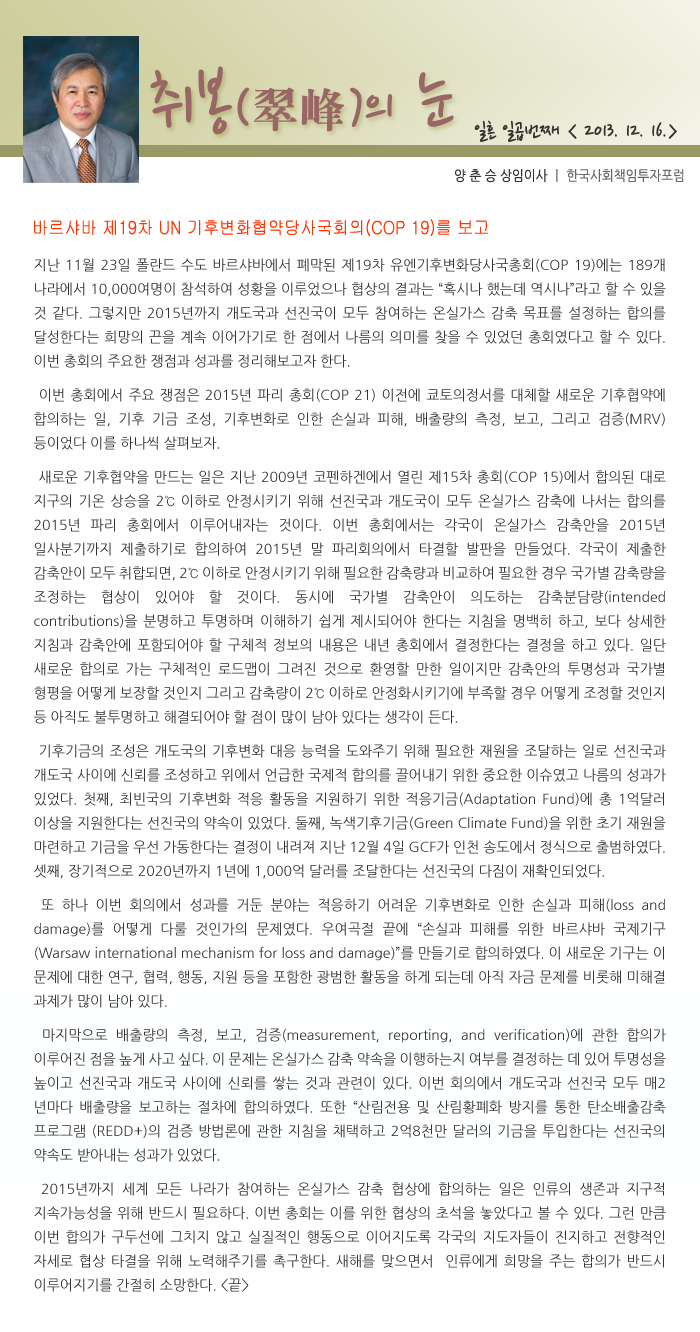
<style>
.page{position:relative;width:700px;height:1332px;background:#ffffff}
.page>*{position:absolute;margin:0}
.t1{font:77.5px "NanumPen";color:#996666}
.t2{font:60px "NanumPen";color:#996666}
.t3{font:48px "H2mjrE";color:#996666}
.t4{font:24px "NanumPen";color:#333333}
.t5{font:14px "NanumGothic";color:#666666;scale:0.9 1}
.t6{font:14px "NanumGothic";color:#333333;scale:0.9 1}
.t7{font:18px "Gulim";color:#ff3300;scale:0.9 1}
.t8{font:14px/24px "NanumGothic";color:#333333}
.t9{font:14px/10px "NanumGothic";color:#333333}
</style>
<div class="page">
<p class="t1" style="left:150px;top:66px;width:304px;height:69px">취봉<span class="t2">(</span><span class="t3">翠峰</span><span class="t2">)</span><span class="t2">의</span> 눈</p>
<p class="t4" style="left:474px;top:120px;width:203px;height:22px">일흔 일곱번째 &lt; 2013. 12. 16.&gt;</p>
<p class="t5" style="left:455px;top:169px;width:229px;height:14px"><span class="t6">양 춘 승 상임이사 </span>ㅣ 한국사회책임투자포럼</p>
<p class="t7" style="left:34px;top:219px;width:455px;height:17px">바르샤바 제19차 UN 기후변화협약당사국회의(COP 19)를 보고</p>
<p class="t8" style="left:34px;top:258px;width:632px;height:1034px;text-align:justify">지난 11월 23일 폴란드 수도 바르샤바에서 폐막된 제19차 유엔기후변화당사국총회(COP 19)에는 189개 나라에서 10,000여명이 참석하여 성황을 이루었으나 협상의 결과는 “혹시나 했는데 역시나”라고 할 수 있을 것 같다. 그렇지만 2015년까지 개도국과 선진국이 모두 참여하는 온실가스 감축 목표를 설정하는 합의를 달성한다는 희망의 끈을 계속 이어가기로 한 점에서 나름의 의미를 찾을 수 있었던 총회였다고 할 수 있다. 이번 총회의 주요한 쟁점과 성과를 정리<span class="t9">해보고자 한다.<br><br> 이번 총회에서 주요 쟁점은 2015년 파리 총회(C</span>OP 21) 이전에 쿄토의정서를 대체할 새로운 기후협약에 합의하는 일, 기후 기금 조성, 기후변화로 인한 손실과 피해, 배출량의 측정, 보고, 그리고 검증(MRV) 등이었다 이를 하나씩 <span class="t9">살펴보자.<br><br> 새로운 기후협약을 만드는 일</span>은 지난 2009년 코펜하겐에서 열린 제15차 총회(COP 15)에서 합의된 대로 지구의 기온 상승을 2℃ 이하로 안정시키기 위해 선진국과 개도국이 모두 온실가스 감축에 나서는 합의를 2015년 파리 총회에서 이루어내자는 것이다. 이번 총회에서는 각국이 온실가스 감축안을 2015년 일사분기까지 제출하기로 합의하여 2015년 말 파리회의에서 타결할 발판을 만들었다. 각국이 제출한 감축안이 모두 취합되면, 2℃ 이하로 안정시키기 위해 필요한 감축량과 비교하여 필요한 경우 국가별 감축량을 조정하는 협상이 있어야 할 것이다. 동시에 국가별 감축안이 의도하는 감축분담량(intended contributions)을 분명하고 투명하며 이해하기 쉽게 제시되어야 한다는 지침을 명백히 하고, 보다 상세한 지침과 감축안에 포함되어야 할 구체적 정보의 내용은 내년 총회에서 결정한다는 결정을 하고 있다. 일단 새로운 합의로 가는 구체적인 로드맵이 그려진 것으로 환영할 만한 일이지만 감축안의 투명성과 국가별 형평을 어떻게 보장할 것인지 그리고 감축량이 2℃ 이하로 안정화시키기에 부족할 경우 어떻게 조정할 것인지 등 아직도 불투명하고 해결되어야 할 점이 많이 남아 있다는 생<span class="t9">각이 든다. <br><br> 기후기금의 조성은 개도국의 기후변화 대응 능력을 도와주기 위해</span> 필요한 재원을 조달하는 일로 선진국과 개도국 사이에 신뢰를 조성하고 위에서 언급한 국제적 합의를 끌어내기 위한 중요한 이슈였고 나름의 성과가 있었다. 첫째, 최빈국의 기후변화 적응 활동을 지원하기 위한 적응기금(Adaptation Fund)에 총 1억달러 이상을 지원한다는 선진국의 약속이 있었다. 둘째, 녹색기후기금(Green Climate Fund)을 위한 초기 재원을 마련하고 기금을 우선 가동한다는 결정이 내려져 지난 12월 4일 GCF가 인천 송도에서 정식으로 출범하였다. 셋째, 장기적으로 2020년까지 1년에 1,000억 달러를 조달한다<span class="t9">는 선진국의 다짐이 재확인되었다.  <br><br> 또 하나 이번 회의에서 성과를 거둔 분야는 적응하기 어려운 기후</span>변화로 인한 손실과 피해(loss and damage)를 어떻게 다룰 것인가의 문제였다. 우여곡절 끝에 “손실과 피해를 위한 바르샤바 국제기구 (Warsaw international mechanism for loss and damage)”를 만들기로 합의하였다. 이 새로운 기구는 이 문제에 대한 연구, 협력, 행동, 지원 등을 포함한 광범한 활동을 하게 되는데 아직 자금 문제를 비롯해 미해결 과제가 많이 남<span class="t9">아 있다. <br><br> 마지막으로 배출량의 측정, 보</span>고, 검증(measurement, reporting, and verification)에 관한 합의가 이루어진 점을 높게 사고 싶다. 이 문제는 온실가스 감축 약속을 이행하는지 여부를 결정하는 데 있어 투명성을 높이고 선진국과 개도국 사이에 신뢰를 쌓는 것과 관련이 있다. 이번 회의에서 개도국과 선진국 모두 매2년마다 배출량을 보고하는 절차에 합의하였다. 또한 “산림전용 및 산림황폐화 방지를 통한 탄소배출감축 프로그램 (REDD+)의 검증 방법론에 관한 지침을 채택하고 2억8천만 달러의 기금을 투입한다는 선진국의 약속도 받아내는 성과가<span class="t9"> 있었다.<br><br> 2015년까지 세계 모든 나라가</span> 참여하는 온실가스 감축 협상에 합의하는 일은 인류의 생존과 지구적 지속가능성을 위해 반드시 필요하다. 이번 총회는 이를 위한 협상의 초석을 놓았다고 볼 수 있다. 그런 만큼 이번 합의가 구두선에 그치지 않고 실질적인 행동으로 이어지도록 각국의 지도자들이 진지하고 전향적인 자세로 협상 타결을 위해 노력해주기를 촉구한다. 새해를 맞으면서  인류에게 희망을 주는 합의가 반드시 이루어지기를 간절히 소망한다. &lt;끝&gt;</p>
</div>
